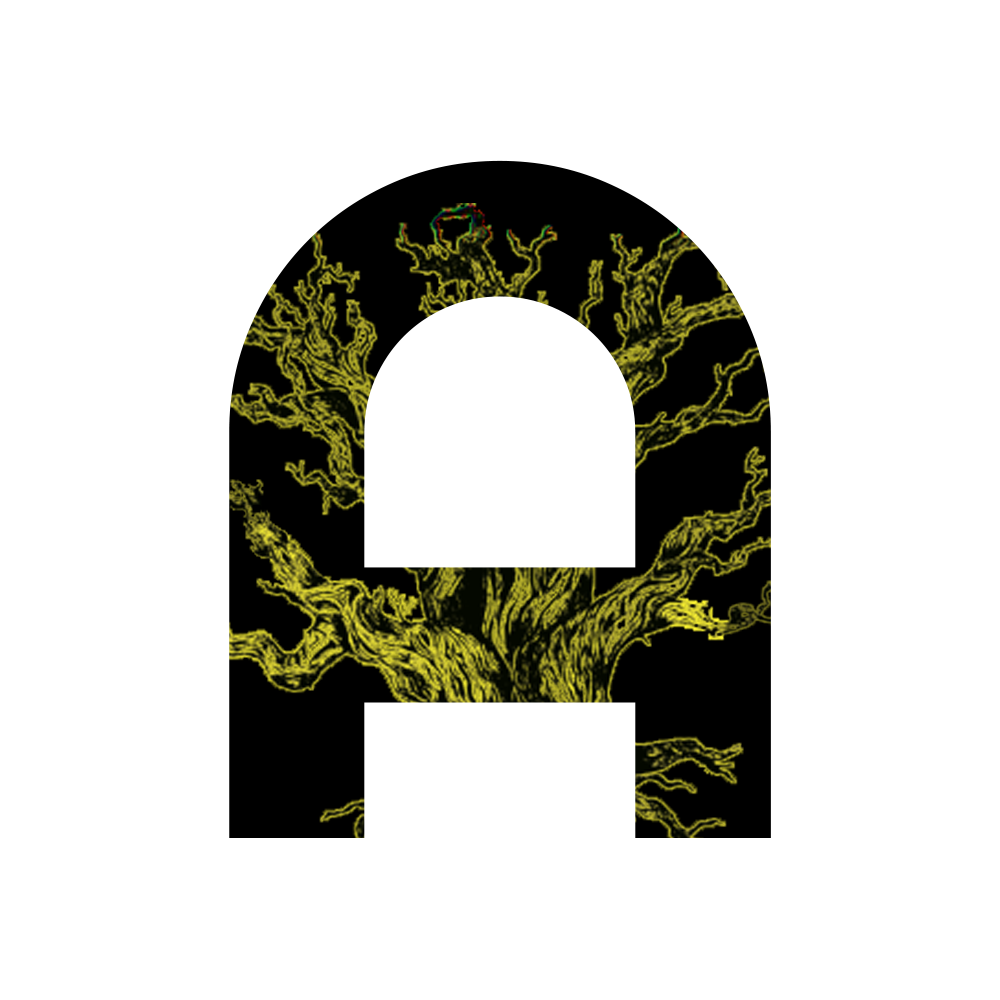
<style>
.page{position:relative;width:1000px;height:1000px;background:#ffffff}
.page>*{position:absolute;margin:0}
.t1{font:966.7px "Righteous-Regular";letter-spacing:0.06em;color:#000000}
</style>
<div class="page">
<p class="t1" style="left:229px;top:160px;width:542px;height:678px">A</p>
</div>
